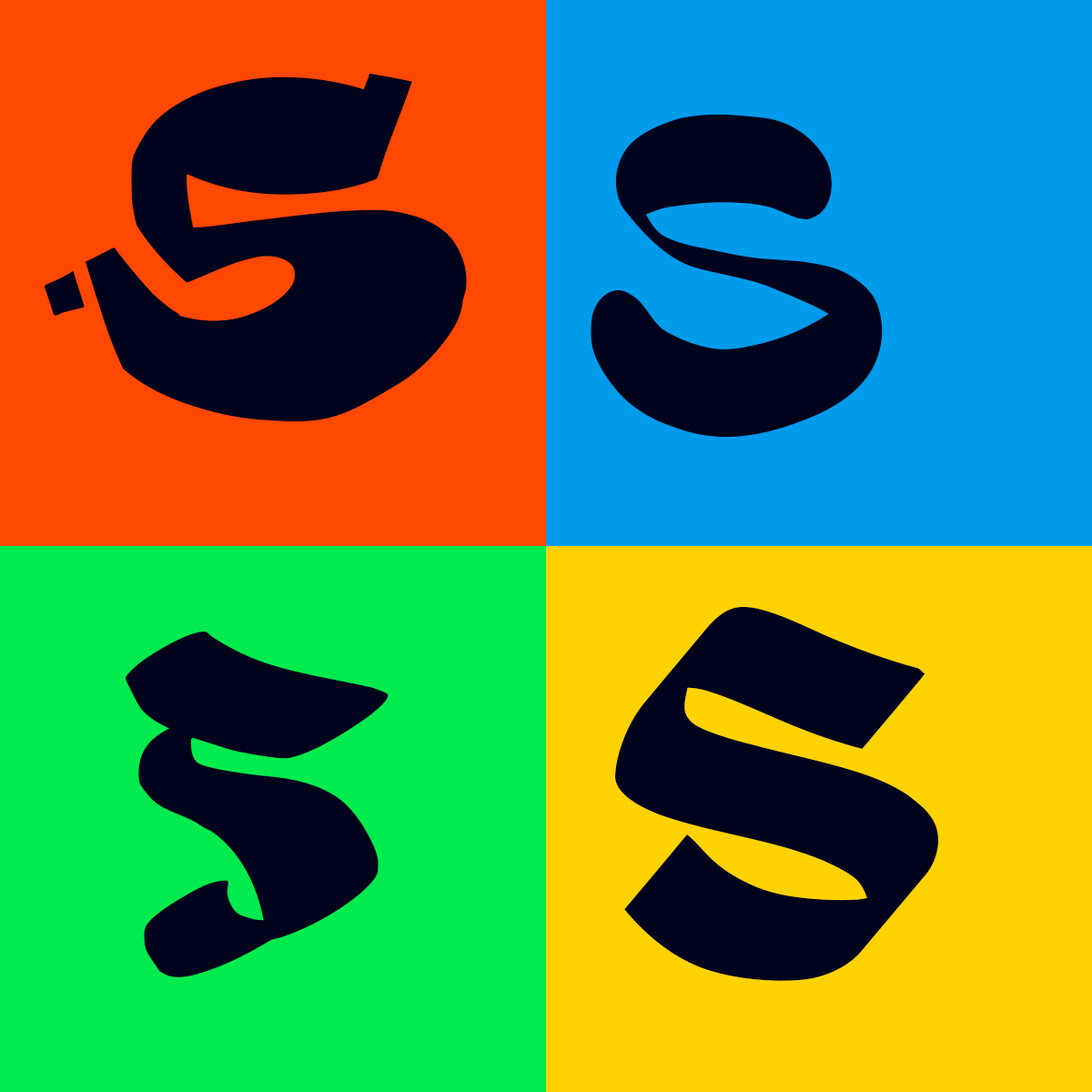
<style>
.page{position:relative;width:1092px;height:1092px;background:#00eb4d}
.page>*{position:absolute;margin:0}
.t1{font:489.1px "Spel-Regular";letter-spacing:0.08em;color:#00031c}
.t2{font:489.1px "SwooshRegular";letter-spacing:0.08em;color:#00031c}
.t3{font:489.1px "NibzRegular";letter-spacing:0.08em;color:#00031c}
.t4{font:489.1px "Slump-Regular";letter-spacing:0.08em;color:#00031c}
</style>
<div class="page">
<p class="t1" style="left:44px;top:73px;width:423px;height:349px">s</p>
<p class="t2" style="left:591px;top:114px;width:292px;height:324px">s</p>
<p class="t3" style="left:615px;top:606px;width:324px;height:375px">s</p>
<p class="t4" style="left:125px;top:631px;width:264px;height:346px">s</p>
</div>
